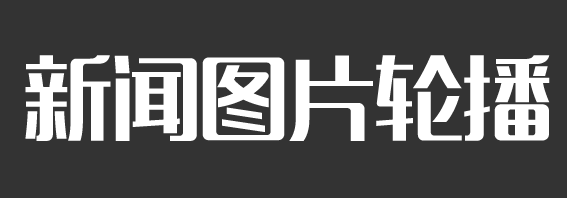
<style>
.page{position:relative;width:567px;height:198px;background:#333333}
.page>*{position:absolute;margin:0}
.t1{font:90px "MFLangQian_Noncommercial-Regular";letter-spacing:-0.025em;color:#ffffff}
</style>
<div class="page">
<p class="t1" style="left:25px;top:55px;width:525px;height:86px">新闻图片轮播</p>
</div>
